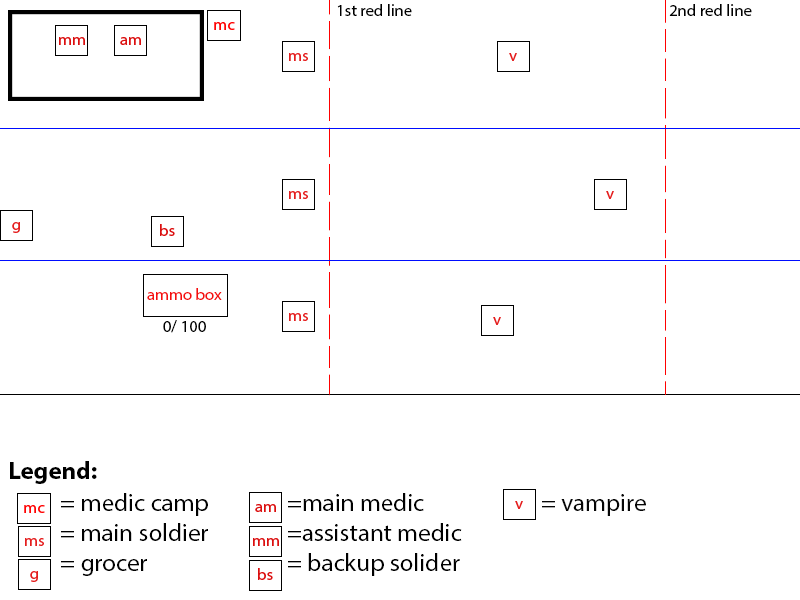
<style>
.page{position:relative;width:800px;height:600px;background:#ffffff}
.page>*{position:absolute;margin:0}
.t1{font:16.7px "MyriadPro-Regular";color:#000000}
.t2{font:16.7px "MyriadPro-Regular";color:#f50e0e}
.t3{font:25px "MyriadPro-Bold";color:#000000}
.t4{font:25px "MyriadPro-Regular";color:#000000}
.t5{font:25px "MyriadPro-Regular";color:#060606}
</style>
<div class="page">
<p class="t1" style="left:337px;top:4px;width:75px;height:12px">1st red line</p>
<p class="t1" style="left:669px;top:4px;width:83px;height:12px">2nd red line</p>
<p class="t2" style="left:147px;top:288px;width:75px;height:12px">ammo box</p>
<p class="t1" style="left:163px;top:320px;width:43px;height:13px">0/ 100</p>
<p class="t3" style="left:10px;top:461px;width:87px;height:23px">Legend:</p>
<p class="t4" style="left:61px;top:493px;width:147px;height:83px">= medic camp<br> = main soldier<br> = grocer</p>
<p class="t4" style="left:288px;top:493px;width:174px;height:83px">=main medic<br>=assistant medic<br>= backup solider</p>
<p class="t5" style="left:542px;top:494px;width:104px;height:22px">= vampire</p>
</div>
